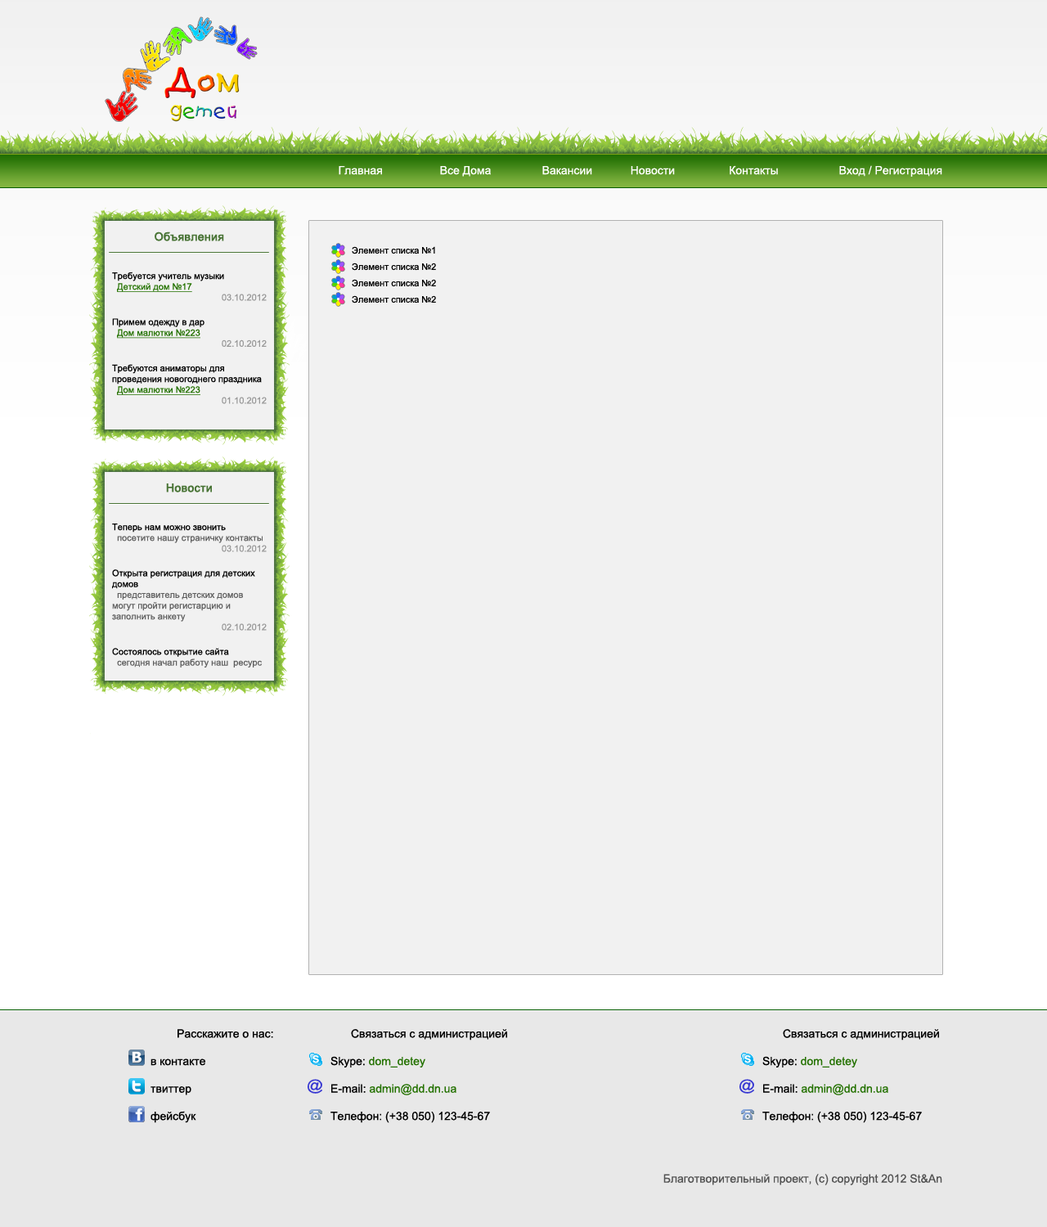
<style>
.page{position:relative;width:1047px;height:1227px;background:#f1f1f1}
.page>*{position:absolute;margin:0}
.t1{font:11.5px "ArialMT";color:#ffffff}
.t2{font:9px "ArialMT";color:#000000}
.t3{font:11.5px "ArialMT";color:#497436;font-weight:bold}
.t4{font:9px "ArialMT";color:#237100;text-decoration:underline}
.t5{font:9px "ArialMT";color:#999999}
.t6{font:9px "ArialMT";color:#606060}
.t7{font:11.5px "ArialMT";color:#000000}
.t8{font:11.5px "ArialMT";color:#237100}
.t9{font:11.5px "ArialMT";color:#535353}
</style>
<div class="page">
<p class="t1" style="left:339px;top:165px;width:604px;height:12px">Главная                  Все Дома                Вакансии            Новости                 Контакты                   Вход / Регистрация</p>
<p class="t2" style="left:112px;top:232px;width:155px;height:172px;text-align:center"><span class="t3">Объявления<br><br><br></span>Требуется учитель музыки<br>  <span class="t4">Детский дом №17<br></span><span class="t5">03.10.2012<br><br></span>Примем одежду в дар<br>  <span class="t4">Дом малютки №223<br></span><span class="t5">02.10.2012<br><br></span>Требуются аниматоры для проведения новогоднего праздника      <br>  <span class="t4">Дом малютки №223<br></span><span class="t5">01.10.2012</span></p>
<p class="t2" style="left:352px;top:246px;width:83px;height:8px">Элемент списка №1</p>
<p class="t2" style="left:352px;top:263px;width:84px;height:8px">Элемент списка №2</p>
<p class="t2" style="left:352px;top:279px;width:84px;height:8px">Элемент списка №2</p>
<p class="t2" style="left:352px;top:295px;width:84px;height:9px">Элемент списка №2</p>
<p class="t6" style="left:112px;top:484px;width:155px;height:184px;text-align:center"><span class="t3">Новости<br><br><br></span><span class="t2">Теперь нам можно звонить<br></span>  посетите нашу страничку контакты<br><span class="t5">03.10.2012<br><br></span><span class="t2">Открыта регистрация для детских домов<br></span>  представитель детских домов могут пройти регистарцию и заполнить анкету<br><span class="t5">02.10.2012<br><br></span><span class="t2">Состоялось открытие сайта<br></span>  сегодня начал работу наш  ресурс<br><span class="t5">01.10.2012</span></p>
<p class="t7" style="left:151px;top:1029px;width:122px;height:94px;text-align:center">Расскажите о нас:<br><br>в контакте<br><br>твиттер<br><br>фейсбук</p>
<p class="t7" style="left:331px;top:1029px;width:176px;height:94px;text-align:center">Связаться с администрацией<br><br>Skype: <span class="t8">dom_detey<br></span><br>E-mail: <span class="t8">admin@dd.dn.ua<br></span><br>Телефон: (+38 050) 123-45-67</p>
<p class="t7" style="left:763px;top:1029px;width:176px;height:94px;text-align:center">Связаться с администрацией<br><br>Skype: <span class="t8">dom_detey<br></span><br>E-mail: <span class="t8">admin@dd.dn.ua<br></span><br>Телефон: (+38 050) 123-45-67</p>
<p class="t9" style="left:664px;top:1174px;width:279px;height:12px">Благотворительный проект, (c) copyright 2012 St&amp;An</p>
</div>
